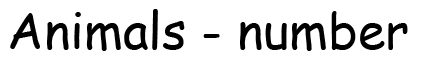
<style>
.page{position:relative;width:425px;height:57px;background:#ffffff}
.page>*{position:absolute;margin:0}
.t1{font:50px "ComicSansMS";color:#000000}
</style>
<div class="page">
<p class="t1" style="left:10px;top:9px;width:398px;height:42px">Animals - number</p>
</div>
